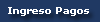
<style>
.page{position:relative;width:100px;height:22px;background:#203963}
.page>*{position:absolute;margin:0}
.t1{font:10px "Verdana-Bold";color:#ffffff}
</style>
<div class="page">
<p class="t1" style="left:8px;top:7px;width:81px;height:9px">Ingreso Pagos</p>
</div>
